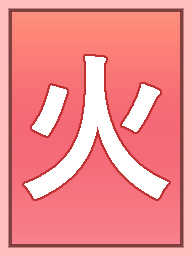
<style>
.page{position:relative;width:192px;height:256px}
.page>*{position:absolute;margin:0}
.t1{font:160px "YuGothicUI-Bold";color:#ffffff}
</style>
<div class="page">
<p class="t1" style="left:24px;top:56px;width:145px;height:143px">火</p>
</div>
